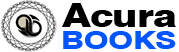
<style>
.page{position:relative;width:179px;height:52px;background:#ffffff}
.page>*{position:absolute;margin:0}
.t1{font:32.9px "Swiss721BT-Heavy";letter-spacing:-0.02em;color:#000000;scale:1.23 1}
.t2{font:25.6px "Swiss721BT-Heavy";letter-spacing:-0.02em;color:#0055ff;text-transform:uppercase;scale:1.23 1}
</style>
<div class="page">
<p class="t1" style="left:62px;top:3px;width:114px;height:24px">Acura</p>
<p class="t2" style="left:63px;top:31px;width:113px;height:18px">books</p>
</div>
